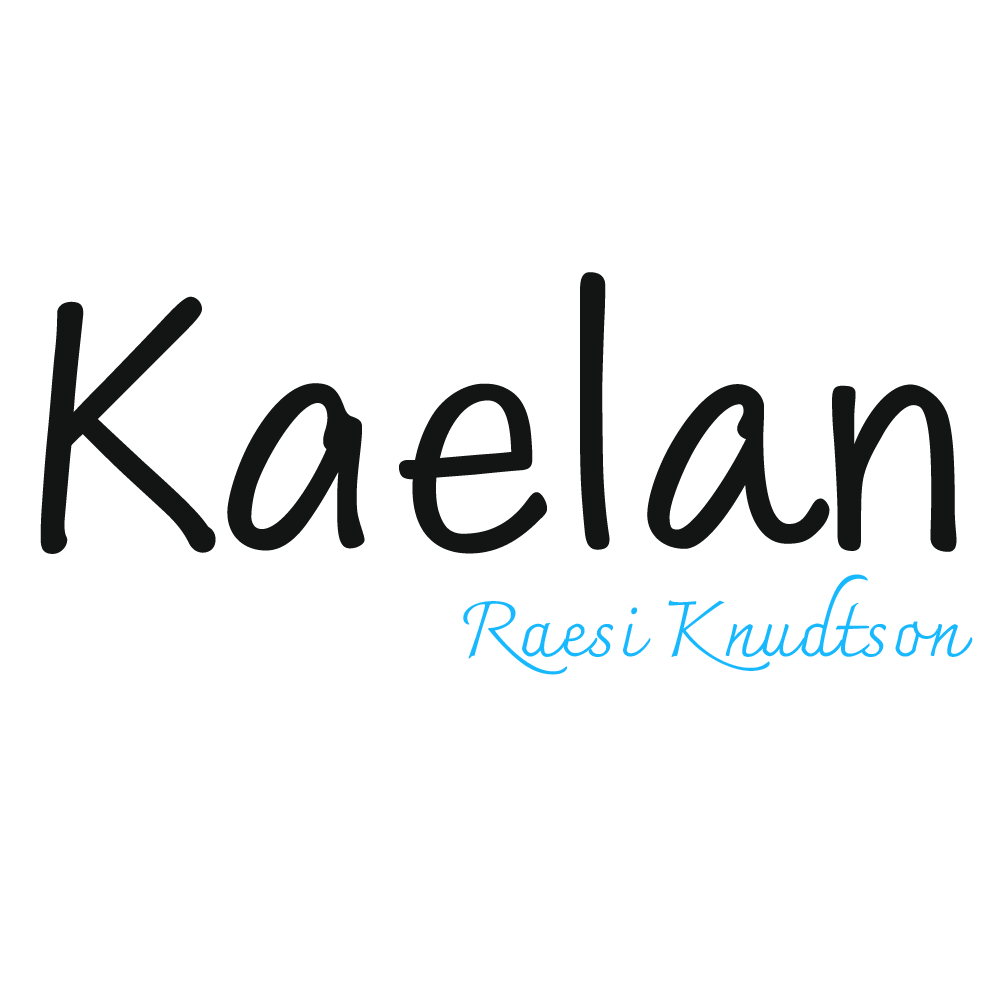
<style>
.page{position:relative;width:1000px;height:1000px;background:#ffffff}
.page>*{position:absolute;margin:0}
.t1{font:423.9px "Maku-Regular";letter-spacing:0.015em;color:#131515}
.t2{font:77px "Charmonman-Regular";letter-spacing:0.015em;color:#18b8ff}
</style>
<div class="page">
<p class="t1" style="left:40px;top:272px;width:917px;height:282px">Kaelan</p>
<p class="t2" style="left:463px;top:574px;width:510px;height:101px">Raesi Knudtson</p>
</div>
